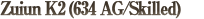
<style>
.page{position:relative;width:204px;height:19px;background:#ffffff}
.page>*{position:absolute;margin:0}
.t1{font:18px "RyuminPro-ExBold";letter-spacing:-0.08em;color:#4a3f32;font-weight:bold;scale:0.9 1}
</style>
<div class="page">
<p class="t1" style="left:0px;top:0px;width:181px;height:19px">Zuiun K2 (634 AG/Skilled)</p>
</div>
